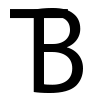
<style>
.page{position:relative;width:100px;height:100px;background:#ffffff}
.page>*{position:absolute;margin:0}
.t1{font:123.1px "MyriadPro-Regular";color:#000000;scale:0.94 1}
</style>
<div class="page">
<p class="t1" style="left:10px;top:9px;width:58px;height:83px">T</p>
<p class="t1" style="left:34px;top:8px;width:49px;height:85px">B</p>
</div>
